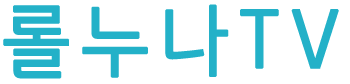
<style>
.page{position:relative;width:350px;height:84px;background:#ffffff}
.page>*{position:absolute;margin:0}
.t1{font:76.8px "GoyangIlsanR-Regular";letter-spacing:0.12em;color:#23b1c8;font-weight:bold}
</style>
<div class="page">
<p class="t1" style="left:3px;top:4px;width:336px;height:75px">롤누나TV</p>
</div>
